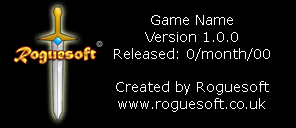
<style>
.page{position:relative;width:296px;height:128px;background:#000000}
.page>*{position:absolute;margin:0}
.t1{font:14px "Verdana";color:#ffffff}
</style>
<div class="page">
<p class="t1" style="left:114px;top:15px;width:156px;height:97px;text-align:center">Game Name<br>Version 1.0.0<br>Released: 0/month/00<br><br>Created by Roguesoft<br>www.roguesoft.co.uk</p>
</div>
